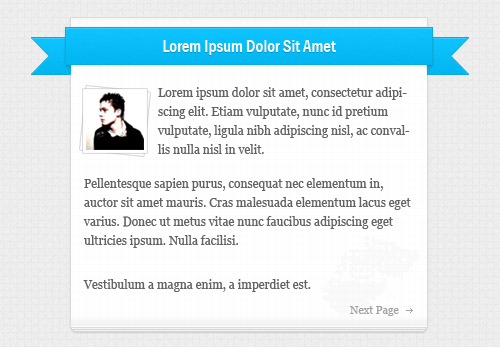
<style>
.page{position:relative;width:500px;height:347px;background:#ffffff}
.page>*{position:absolute;margin:0}
.t1{font:17px "FranklinGothic-MediumCond";color:#ffffff}
.t2{font:12px/19px "Georgia";color:#636363}
.t3{font:11px "Georgia";color:#a2a2a2}
</style>
<div class="page">
<p class="t1" style="left:163px;top:40px;width:173px;height:15px">Lorem Ipsum Dolor Sit Amet</p>
<p class="t2" style="left:157px;top:87px;width:253px;height:67px">Lorem ipsum dolor sit amet, consectetur adipiscing elit. Etiam vulputate, nunc id pretium vulputate, ligula nibh adipiscing nisl, ac convallis nulla nisl in velit.</p>
<p class="t2" style="left:83px;top:178px;width:328px;height:114px">Pellentesque sapien purus, consequat nec elementum in, auctor sit amet mauris. Cras malesuada elementum lacus eget varius. Donec ut metus vitae nunc faucibus adipiscing eget ultricies ipsum. Nulla facilisi.<br><br>Vestibulum a magna enim, a imperdiet est.</p>
<p class="t3" style="left:350px;top:306px;width:49px;height:10px">Next Page</p>
</div>
